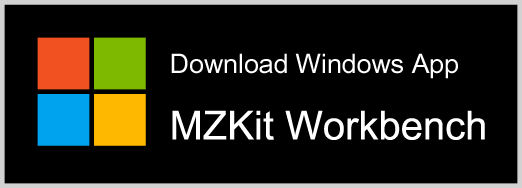
<style>
.page{position:relative;width:522px;height:188px;background:#000000}
.page>*{position:absolute;margin:0}
.t1{font:26.7px "ArialUnicodeMS";color:#ffffff}
.t2{font:40px "ArialUnicodeMS";color:#ffffff}
</style>
<div class="page">
<p class="t1" style="left:171px;top:53px;width:287px;height:26px">Download Windows App</p>
<p class="t2" style="left:172px;top:110px;width:313px;height:30px">MZKit Workbench</p>
</div>
